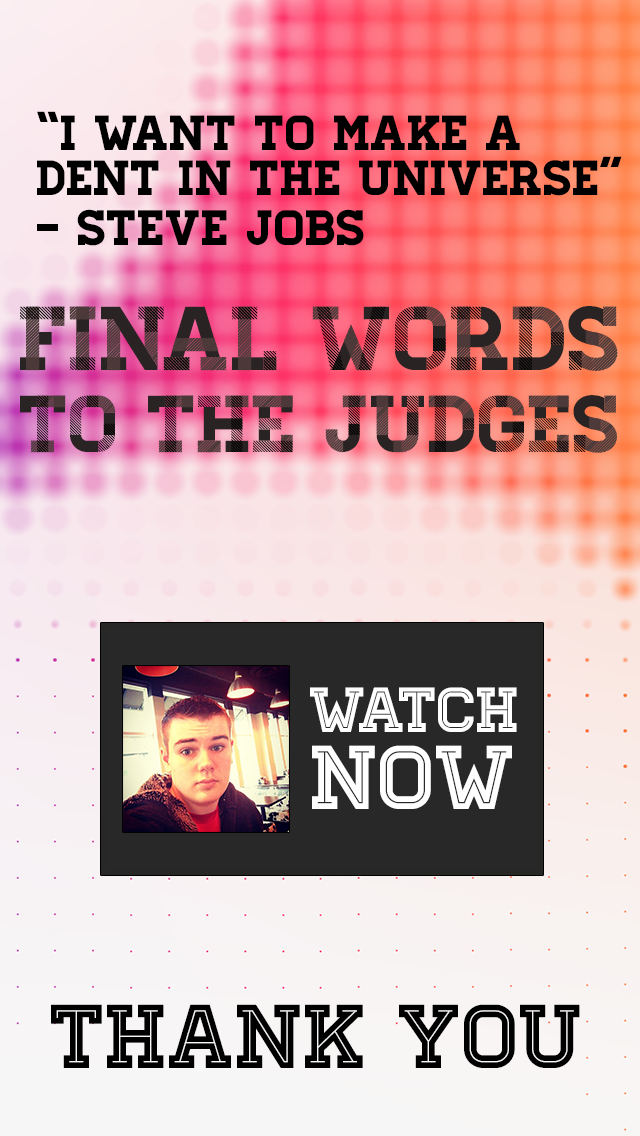
<style>
.page{position:relative;width:640px;height:1136px}
.page>*{position:absolute;margin:0}
.t1{font:49.1px/45.1px "Homestead-Regular";color:#000000}
.t2{font:49.8px/49.8px "Homestead-Regular";color:#000000}
.t3{font:80.6px/81.5px "Homestead-One";color:#2a2323}
.t4{font:90.6px/49.8px "Homestead-One";color:#2a2323}
.t5{font:80.6px/81.5px "Homestead-Three";color:#000000}
.t6{font:90.6px/49.8px "Homestead-Three";color:#000000}
.t7{font:80.6px/81.5px "Homestead-Two";color:#503b3b}
.t8{font:90.6px/49.8px "Homestead-Two";color:#503b3b}
.t9{font:63.4px/62.5px "Homestead-Inline";color:#ffffff}
.t10{font:90.6px/77px "Homestead-Inline";color:#ffffff}
.t11{font:90.6px "Homestead-Inline";color:#000000}
</style>
<div class="page">
<p class="t1" style="left:37px;top:111px;width:585px;height:135px">“I want to make a<br>dent in the universe”<br><span class="t2">- steve jobs</span></p>
<p class="t3" style="left:20px;top:306px;width:585px;height:146px"><span class="t4">Final words<br></span>to the judges</p>
<p class="t5" style="left:20px;top:306px;width:566px;height:146px"><span class="t6">Final words<br></span>to the judges</p>
<p class="t7" style="left:26px;top:306px;width:592px;height:147px"><span class="t8">Final words<br></span>to the judges</p>
<p class="t9" style="left:310px;top:687px;width:207px;height:122px;text-align:center">Watch<br><span class="t10">now</span></p>
<p class="t11" style="left:51px;top:1004px;width:529px;height:64px">THANK YOU</p>
</div>
